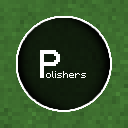
<style>
.page{position:relative;width:128px;height:128px}
.page>*{position:absolute;margin:0}
.t1{font:8px "Minecraftia";color:#ffffff}
</style>
<div class="page">
<p class="t1" style="left:46px;top:71px;width:40px;height:7px">olishers</p>
</div>
